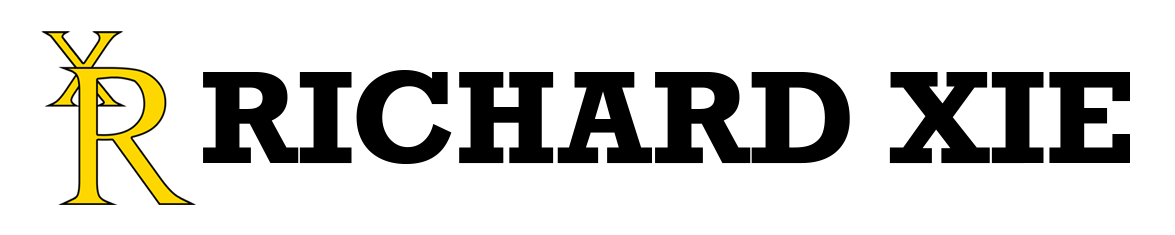
<style>
.page{position:relative;width:1175px;height:235px;background:#ffffff}
.page>*{position:absolute;margin:0}
.t1{font:124.4px "Rockwell-Bold";color:#000000}
</style>
<div class="page">
<p class="t1" style="left:203px;top:70px;width:927px;height:94px">RICHARD XIE</p>
</div>
